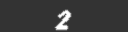
<style>
.page{position:relative;width:128px;height:32px;background:#333333}
.page>*{position:absolute;margin:0}
.t1{font:30.6px "DomDiagonalBT-Bold";color:#ffffff;scale:1.08 1}
</style>
<div class="page">
<p class="t1" style="left:55px;top:10px;width:16px;height:20px">2</p>
</div>
